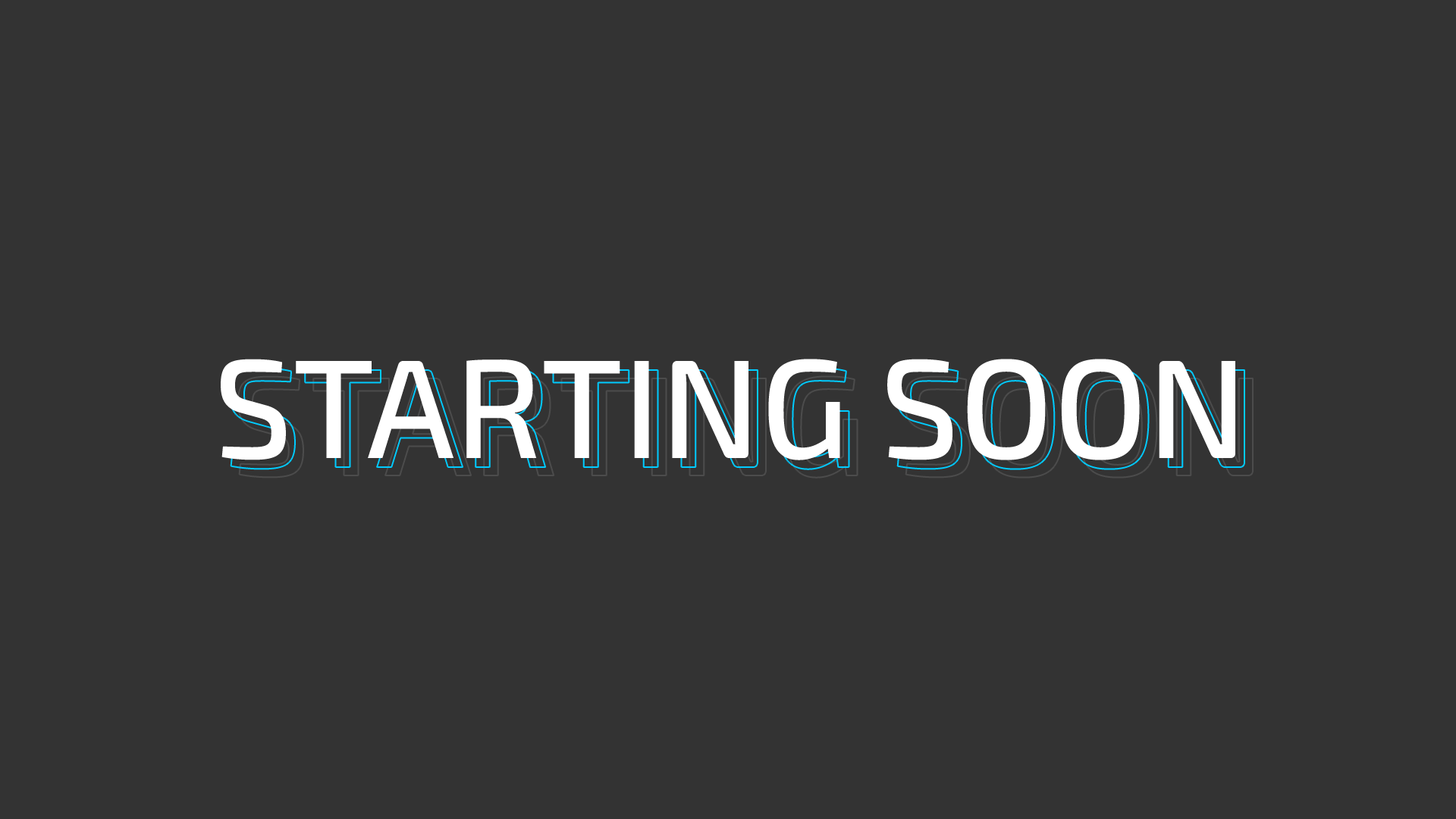
<style>
.page{position:relative;width:1456px;height:819px;background:#333333}
.page>*{position:absolute;margin:0}
.t1{font:140.7px "Exo2-Medium";color:#ffffff;text-transform:uppercase}
</style>
<div class="page">
<p class="t1" style="left:221px;top:359px;width:1014px;height:101px">STARTING SOON</p>
</div>
